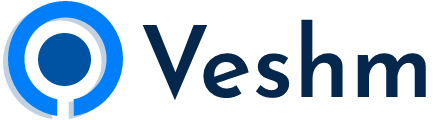
<style>
.page{position:relative;width:436px;height:120px;background:#ffffff}
.page>*{position:absolute;margin:0}
.t1{font:99px "JosefinSans-SemiBold";color:#04274b}
</style>
<div class="page">
<p class="t1" style="left:142px;top:19px;width:284px;height:82px">Veshm</p>
</div>
